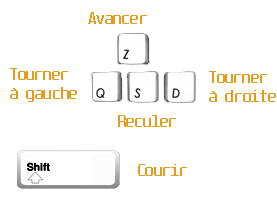
<style>
.page{position:relative;width:277px;height:204px;background:#ffffff}
.page>*{position:absolute;margin:0}
.t1{font:14px "Unispace-Regular";color:#e59b1a}
</style>
<div class="page">
<p class="t1" style="left:88px;top:12px;width:59px;height:12px">Avancer</p>
<p class="t1" style="left:10px;top:68px;width:67px;height:34px;text-align:justify">Tourner<br>à gauche</p>
<p class="t1" style="left:209px;top:71px;width:67px;height:31px;text-align:justify">Tourner<br>à droite</p>
<p class="t1" style="left:118px;top:115px;width:58px;height:12px">Reculer</p>
<p class="t1" style="left:138px;top:164px;width:49px;height:12px">Courir</p>
</div>
